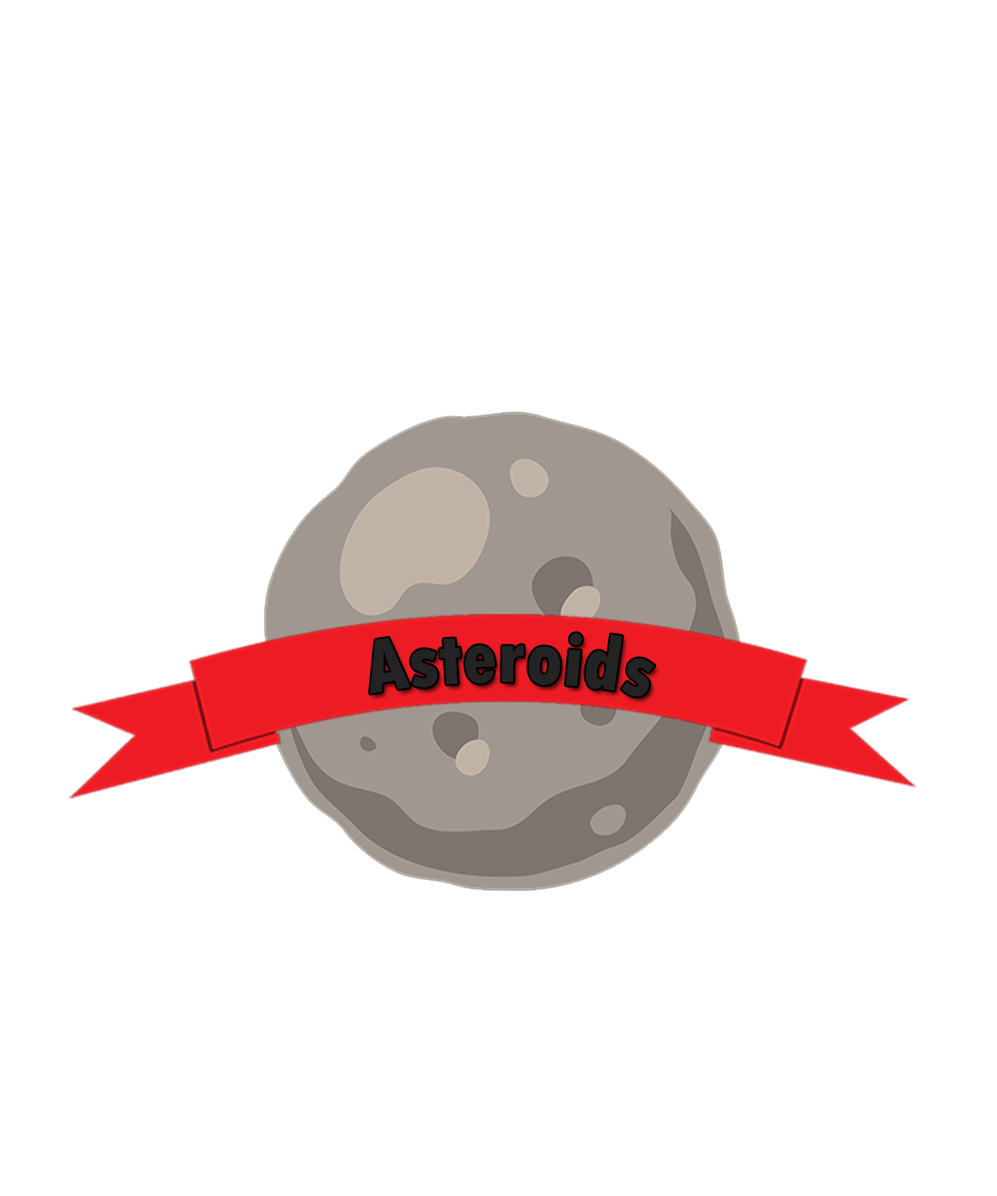
<style>
.page{position:relative;width:997px;height:1196px;background:#ffffff}
.page>*{position:absolute;margin:0}
.t1{font:79.7px "TwCenMT-CondensedExtraBold";color:#232323}
</style>
<div class="page">
<p class="t1" style="left:370px;top:633px;width:285px;height:64px">Asteroids</p>
</div>
